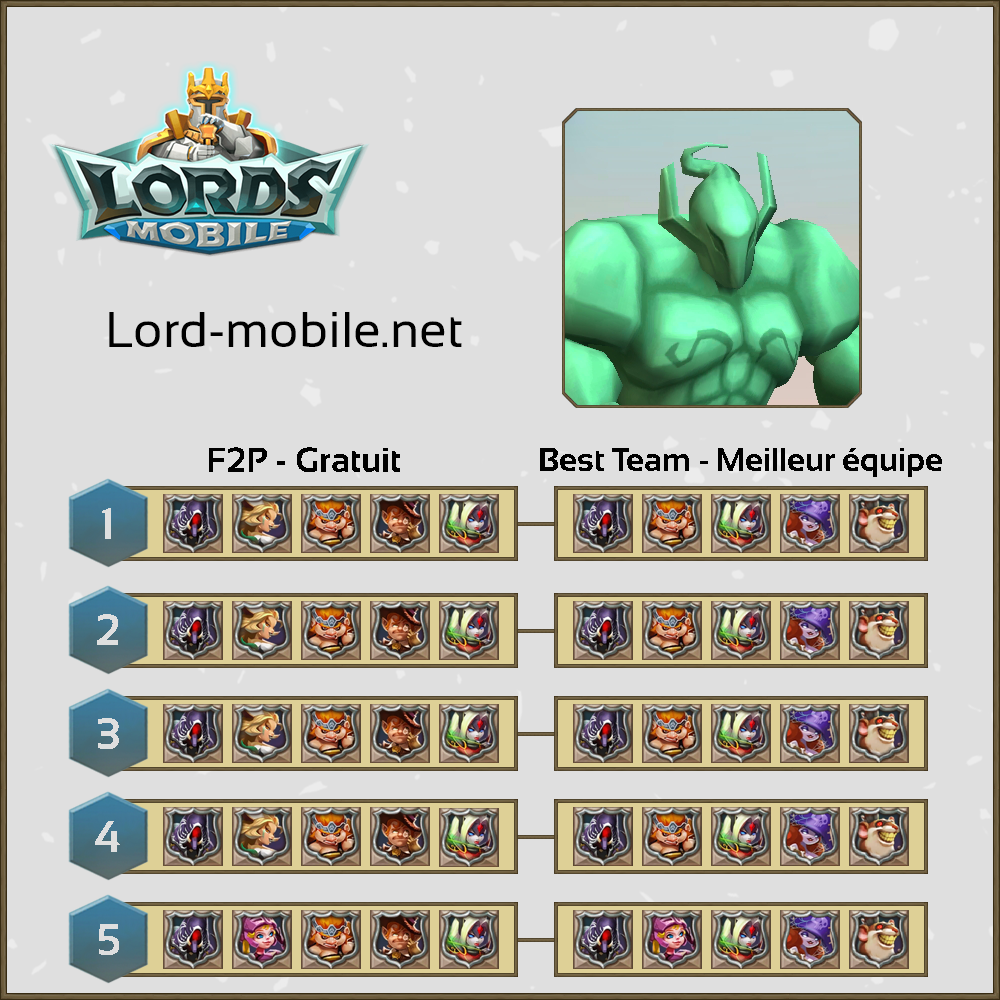
<style>
.page{position:relative;width:1000px;height:1000px;background:#dfdfdf}
.page>*{position:absolute;margin:0}
.t1{font:50px "Sansation-Regular";color:#000000}
.t2{font:34.7px "Sansation-Bold";color:#000000}
.t3{font:33.3px "Sansation-Bold";color:#000000}
.t4{font:44.4px "Sansation-Bold";color:#dfdfdf}
</style>
<div class="page">
<p class="t1" style="left:109px;top:312px;width:353px;height:35px">Lord-mobile.net</p>
<p class="t2" style="left:209px;top:447px;width:191px;height:25px">F2P - Gratuit</p>
<p class="t3" style="left:540px;top:448px;width:402px;height:29px">Best Team - Meilleur équipe</p>
<p class="t4" style="left:102px;top:508px;width:9px;height:31px">1</p>
<p class="t4" style="left:97px;top:614px;width:21px;height:31px">2</p>
<p class="t4" style="left:98px;top:718px;width:21px;height:31px">3</p>
<p class="t4" style="left:95px;top:821px;width:25px;height:31px">4</p>
<p class="t4" style="left:99px;top:924px;width:20px;height:31px">5</p>
</div>
